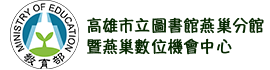
<style>
.page{position:relative;width:270px;height:70px;background:#ffffff}
.page>*{position:absolute;margin:0}
.t1{font:15.8px/20.8px "HannotateTC-W5";color:#062700;font-weight:bold}
</style>
<div class="page">
<p class="t1" style="left:87px;top:17px;width:177px;height:38px">高雄市立圖書館燕巢分館<br>暨燕巢數位機會中心</p>
</div>
